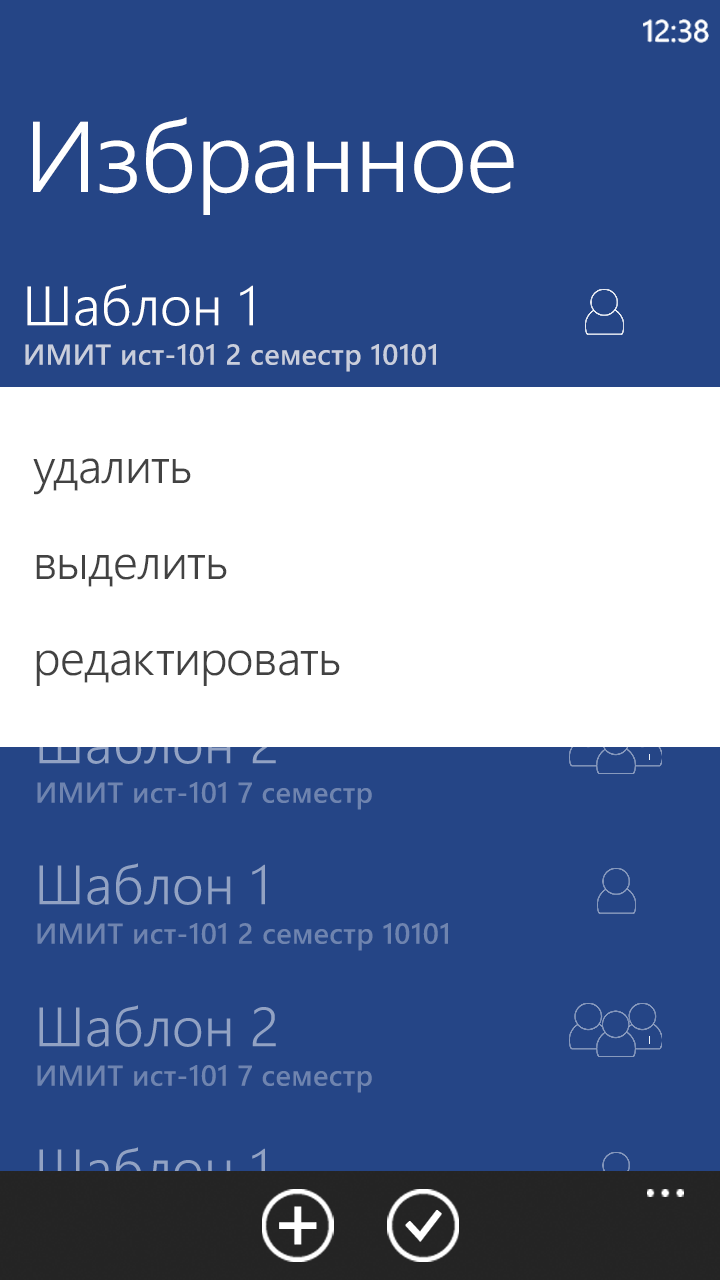
<style>
.page{position:relative;width:720px;height:1280px;background:#254586}
.page>*{position:absolute;margin:0}
.t1{font:100px "SegoeWP-SemiLight";letter-spacing:-0.01em;color:#ffffff}
.t2{font:55.3px "SegoeWP-SemiLight";color:#ffffff}
.t3{font:29px "SegoeWP-Semibold";letter-spacing:0.012em;color:#c9cedc}
.t4{font:48px/96px "SegoeWP-SemiLight";letter-spacing:-0.01em;color:#424242}
.t5{font:29px "SegoeWP-Semibold";letter-spacing:0.012em;color:#6f84af}
.t6{font:55.3px "SegoeWP-SemiLight";color:#92a2c3}
.t7{font:55.3px "SegoeWP-SemiLight"}
</style>
<div class="page">
<p class="t1" style="left:33px;top:117px;width:481px;height:98px">Избранное</p>
<p class="t2" style="left:27px;top:284px;width:226px;height:42px">Шаблон 1</p>
<p class="t3" style="left:25px;top:344px;width:411px;height:28px">ИМИТ ист-101 2 семестр 10101</p>
<p class="t4" style="left:33px;top:458px;width:307px;height:228px">удалить<br>выделить<br>редактировать</p>
<p class="t5" style="left:37px;top:782px;width:335px;height:28px">ИМИТ ист-101 7 семестр</p>
<p class="t6" style="left:39px;top:863px;width:226px;height:42px">Шаблон 1</p>
<p class="t5" style="left:37px;top:923px;width:411px;height:28px">ИМИТ ист-101 2 семестр 10101</p>
<p class="t6" style="left:39px;top:1005px;width:237px;height:42px">Шаблон 2</p>
<p class="t5" style="left:37px;top:1065px;width:335px;height:28px">ИМИТ ист-101 7 семестр</p>
<p class="t7" style="left:39px;top:1147px;width:226px;height:42px">Шаблон 1</p>
</div>
